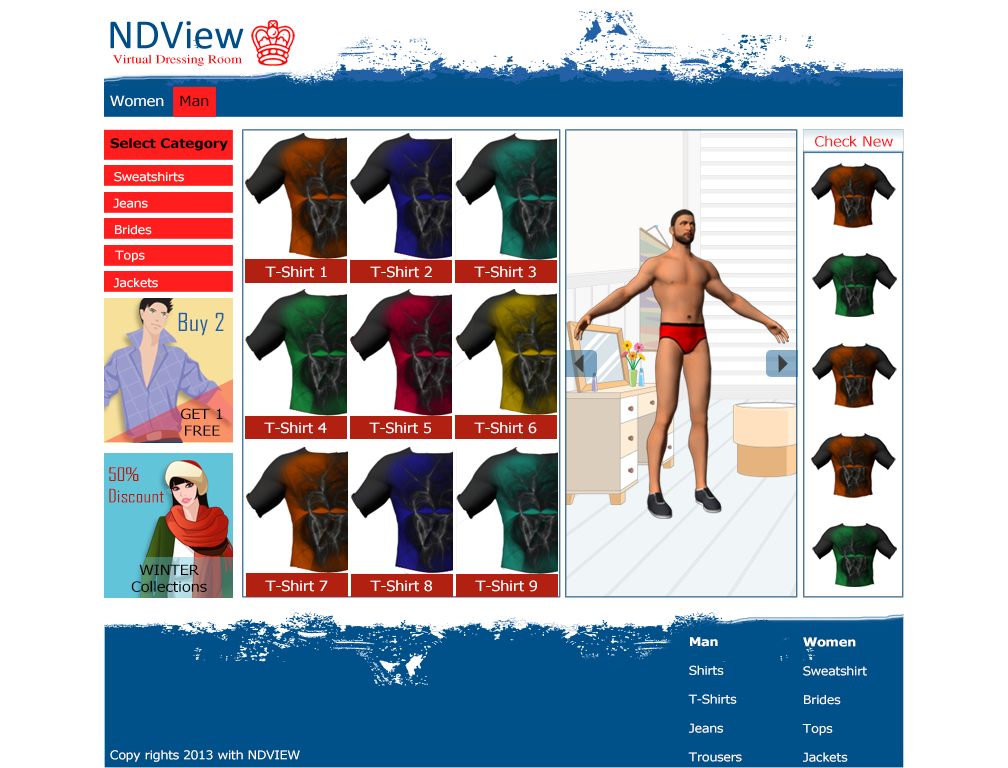
<style>
.page{position:relative;width:1008px;height:768px;background:#ffffff}
.page>*{position:absolute;margin:0}
.t1{font:14px "Tahoma";color:#ffffff;scale:1.15 1}
.t2{font:14px "Tahoma";color:#000000;scale:1.15 1}
.t3{font:14px "Tahoma";color:#ff1d1d;scale:1.15 1}
.t4{font:13px "Tahoma-Bold";color:#000000;scale:1.15 1}
.t5{font:12px "Tahoma";color:#ffffff;scale:1.15 1}
.t6{font:24px "AgencyFB-Reg";color:#2361a6;scale:1.15 1}
.t7{font:18px "AgencyFB-Reg";color:#b12010;scale:1.15 1}
.t8{font:12px "Tahoma-Bold";color:#ffffff;scale:1.15 1}
</style>
<div class="page">
<p class="t1" style="left:110px;top:95px;width:99px;height:12px">Women   <span class="t2">Man</span></p>
<p class="t3" style="left:815px;top:135px;width:78px;height:12px">Check New</p>
<p class="t4" style="left:110px;top:138px;width:118px;height:13px">Select Category</p>
<p class="t5" style="left:114px;top:172px;width:70px;height:10px">Sweatshirts</p>
<p class="t5" style="left:113px;top:198px;width:35px;height:10px">Jeans</p>
<p class="t5" style="left:115px;top:225px;width:37px;height:10px">Brides</p>
<p class="t5" style="left:115px;top:250px;width:30px;height:12px">Tops</p>
<p class="t1" style="left:265px;top:266px;width:62px;height:12px">T-Shirt 1</p>
<p class="t1" style="left:370px;top:266px;width:62px;height:12px">T-Shirt 2</p>
<p class="t1" style="left:474px;top:266px;width:62px;height:12px">T-Shirt 3</p>
<p class="t5" style="left:113px;top:278px;width:45px;height:10px">Jackets</p>
<p class="t6" style="left:178px;top:312px;width:46px;height:24px">Buy 2</p>
<p class="t2" style="left:181px;top:408px;width:42px;height:28px;text-align:center">GET 1<br>FREE</p>
<p class="t1" style="left:264px;top:422px;width:63px;height:12px">T-Shirt 4</p>
<p class="t1" style="left:369px;top:422px;width:62px;height:12px">T-Shirt 5</p>
<p class="t1" style="left:474px;top:422px;width:63px;height:12px">T-Shirt 6</p>
<p class="t7" style="left:109px;top:467px;width:55px;height:36px">50%<br>Discount</p>
<p class="t2" style="left:131px;top:564px;width:76px;height:28px;text-align:center">WINTER<br>Collections</p>
<p class="t1" style="left:265px;top:580px;width:63px;height:12px">T-Shirt 7</p>
<p class="t1" style="left:370px;top:580px;width:62px;height:12px">T-Shirt 8</p>
<p class="t1" style="left:475px;top:580px;width:62px;height:12px">T-Shirt 9</p>
<p class="t5" style="left:688px;top:637px;width:54px;height:125px"><span class="t8">Man<br><br></span>Shirts<br><br>T-Shirts<br><br>Jeans<br><br>Trousers</p>
<p class="t5" style="left:802px;top:637px;width:65px;height:125px"><span class="t8">Women<br><br></span>Sweatshirt<br><br>Brides<br><br>Tops<br><br>Jackets</p>
<p class="t5" style="left:110px;top:750px;width:190px;height:12px">Copy rights 2013 with NDVIEW</p>
</div>
